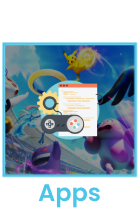
<style>
.page{position:relative;width:140px;height:221px;background:#ffffff}
.page>*{position:absolute;margin:0}
.t1{font:24px "Poppins-SemiBold";color:#4cc6e8}
</style>
<div class="page">
<p class="t1" style="left:38px;top:184px;width:62px;height:24px">Apps</p>
</div>
